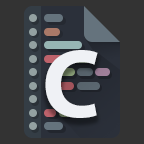
<style>
.page{position:relative;width:144px;height:144px;background:#333333}
.page>*{position:absolute;margin:0}
.t1{font:97.5px "MyriadPro-Bold";color:#eff1f5}
</style>
<div class="page">
<p class="t1" style="left:45px;top:50px;width:53px;height:68px">C</p>
</div>
